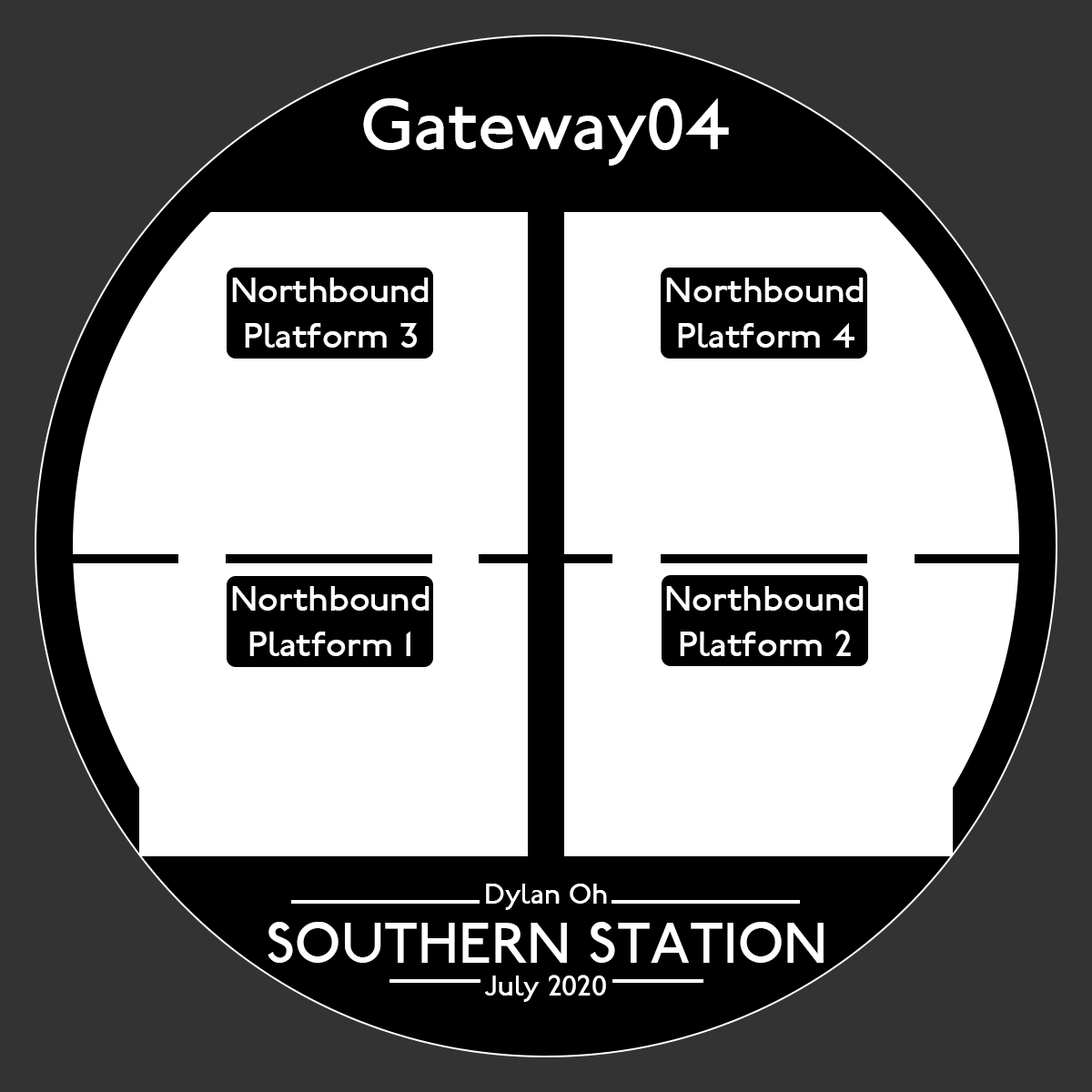
<style>
.page{position:relative;width:1092px;height:1092px;background:#ffffff}
.page>*{position:absolute;margin:0}
.t1{font:75.8px "P22JohnstonUnderground";color:#ffffff}
.t2{font:37.9px "P22JohnstonUnderground";color:#ffffff}
.t3{font:30.3px "P22JohnstonUnderground";color:#ffffff}
.t4{font:60.7px "P22JohnstonUnderground";color:#ffffff}
</style>
<div class="page">
<p class="t1" style="left:363px;top:98px;width:366px;height:68px">Gateway04</p>
<p class="t2" style="left:232px;top:278px;width:197px;height:70px;text-align:center">Northbound<br>Platform 3</p>
<p class="t2" style="left:666px;top:278px;width:198px;height:70px;text-align:center">Northbound<br>Platform 4</p>
<p class="t2" style="left:232px;top:586px;width:198px;height:70px;text-align:center">Northbound<br>Platform 1</p>
<p class="t2" style="left:666px;top:586px;width:198px;height:70px;text-align:center">Northbound<br>Platform 2</p>
<p class="t3" style="left:486px;top:884px;width:121px;height:26px">Dylan Oh</p>
<p class="t4" style="left:268px;top:922px;width:556px;height:41px">SOUTHERN STATION</p>
<p class="t3" style="left:485px;top:975px;width:121px;height:27px">July 2020</p>
</div>
